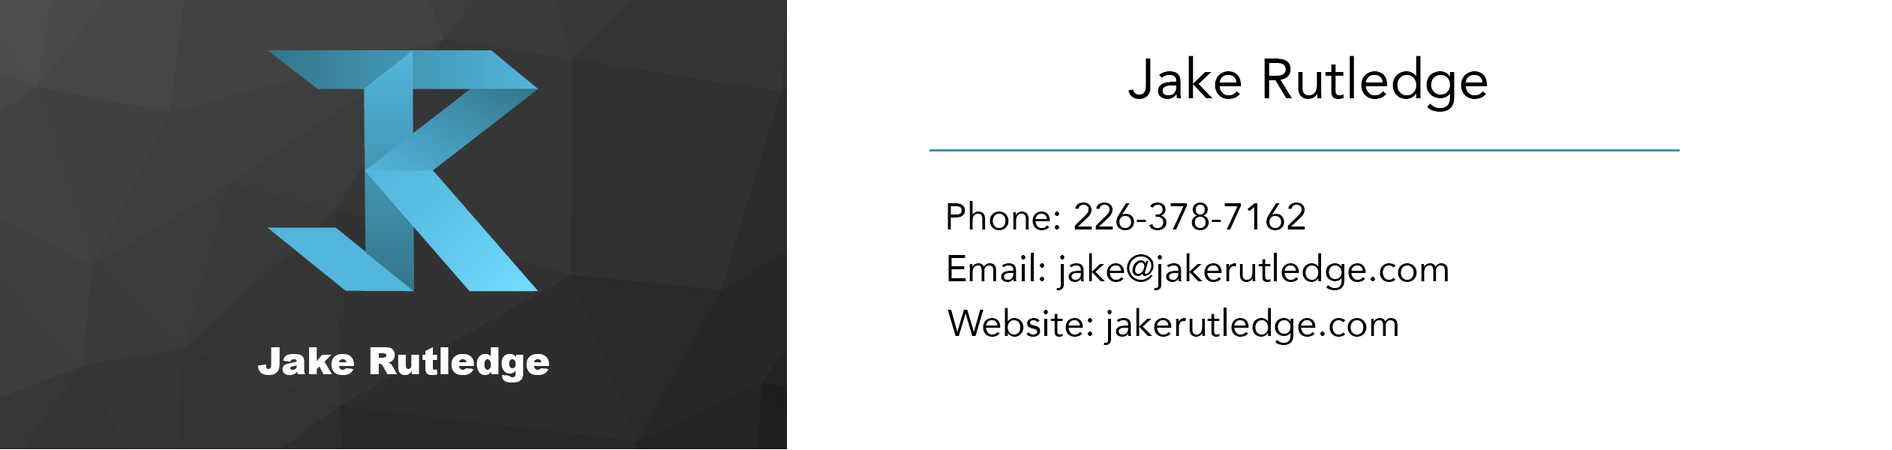
<style>
.page{position:relative;width:1892px;height:450px;background:#ffffff}
.page>*{position:absolute;margin:0}
.t1{font:56.2px "Avenir-Roman";color:#000000}
.t2{font:9px "Avenir-Roman";color:#000000}
.t3{font:9px "Arial-Black";color:#ffffff}
</style>
<div class="page">
<p class="t1" style="left:1128px;top:56px;width:359px;height:56px">Jake Rutledge</p>
<p class="t2" style="left:947px;top:201px;width:358px;height:29px;text-align:center">Phone: 226-378-7162</p>
<p class="t2" style="left:948px;top:253px;width:500px;height:37px;text-align:center">Email: jake@jakerutledge.com</p>
<p class="t2" style="left:947px;top:308px;width:450px;height:37px;text-align:center">Website: jakerutledge.com</p>
<p class="t3" style="left:257px;top:347px;width:292px;height:35px;text-align:center">Jake Rutledge</p>
</div>
